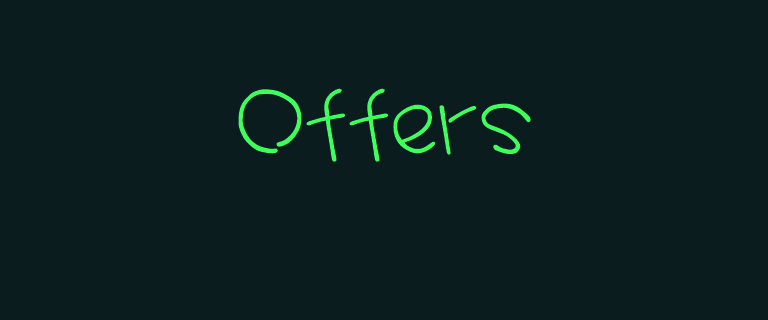
<style>
.page{position:relative;width:768px;height:320px;background:#0a1c1d}
.page>*{position:absolute;margin:0}
.t1{font:96px "JYaYa";color:#3fff5b}
</style>
<div class="page">
<p class="t1" style="left:238px;top:88px;width:293px;height:74px">Offers</p>
</div>
